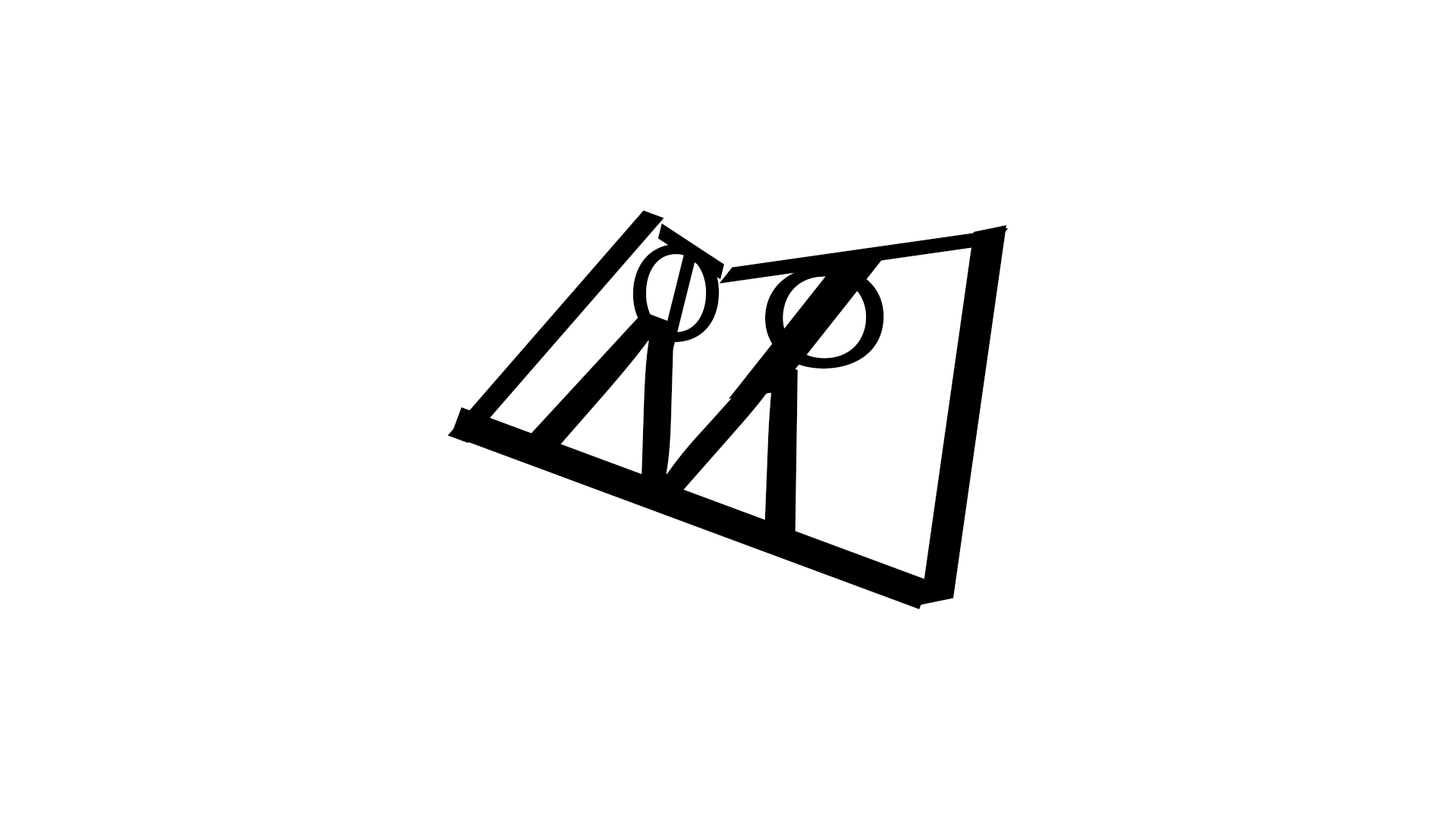
<style>
.page{position:relative;width:1456px;height:819px;background:#ffffff}
.page>*{position:absolute;margin:0}
.t1{font:420.1px "MyriadPro-Regular";color:#000000;scale:0.59 1}
.t2{font:209px "MyriadPro-Regular";color:#000000;scale:0.71 1}
.t3{font:279.3px "MyriadPro-Regular";color:#000000;scale:2 1}
.t4{font:530.6px "MyriadPro-Regular";color:#000000;scale:0.72 1}
.t5{font:140.3px "MyriadPro-Regular";color:#000000}
.t6{font:146.9px "MyriadPro-Regular";color:#000000;scale:1.31 1}
.t7{font:251.3px "MyriadPro-Regular";color:#000000;scale:1.42 1}
.t8{font:703.5px "MyriadPro-Regular";color:#000000;scale:0.49 1}
</style>
<div class="page">
<p class="t1" style="left:447px;top:210px;width:217px;height:234px;rotate:20deg">l</p>
<p class="t2" style="left:653px;top:223px;width:71px;height:161px;rotate:33deg">T</p>
<p class="t3" style="left:719px;top:227px;width:290px;height:172px;rotate:-8deg">T</p>
<p class="t4" style="left:920px;top:224px;width:87px;height:381px;rotate:-12deg">l</p>
<p class="t5" style="left:632px;top:243px;width:87px;height:100px">O</p>
<p class="t6" style="left:765px;top:266px;width:119px;height:103px">O</p>
<p class="t7" style="left:519px;top:312px;width:279px;height:239px;rotate:-159deg">W</p>
<p class="t8" style="left:450px;top:407px;width:480px;height:203px;rotate:110deg">l</p>
</div>
